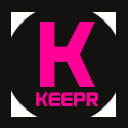
<style>
.page{position:relative;width:128px;height:128px;background:#12120f}
.page>*{position:absolute;margin:0}
.t1{font:112.1px "Usuzi";color:#ff0096;scale:0.73 1}
.t2{font:23.2px "Usuzi";color:#ff0096;scale:0.74 1}
</style>
<div class="page">
<p class="t1" style="left:40px;top:22px;width:55px;height:65px">K</p>
<p class="t2" style="left:36px;top:92px;width:63px;height:14px">Keepr</p>
</div>
